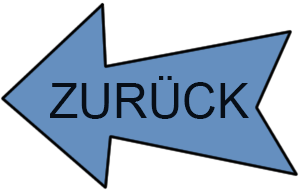
<style>
.page{position:relative;width:299px;height:190px;background:#ffffff}
.page>*{position:absolute;margin:0}
.t1{font:48px "ArialMT";color:#000000}
</style>
<div class="page">
<p class="t1" style="left:50px;top:76px;width:199px;height:43px;opacity:0.94">ZURÜCK</p>
</div>
